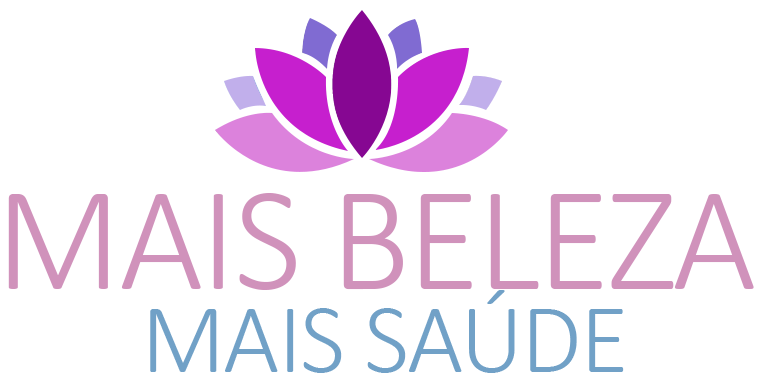
<style>
.page{position:relative;width:759px;height:385px;background:#ffffff}
.page>*{position:absolute;margin:0}
.t1{font:150px "Calibri-Light";letter-spacing:-0.02em;color:#d092bb}
.t2{font:100px "Calibri-Light";letter-spacing:-0.02em;color:#71a1c7}
</style>
<div class="page">
<p class="t1" style="left:8px;top:193px;width:746px;height:97px">MAIS BELEZA</p>
<p class="t2" style="left:150px;top:290px;width:474px;height:83px">MAIS SAÚDE</p>
</div>
